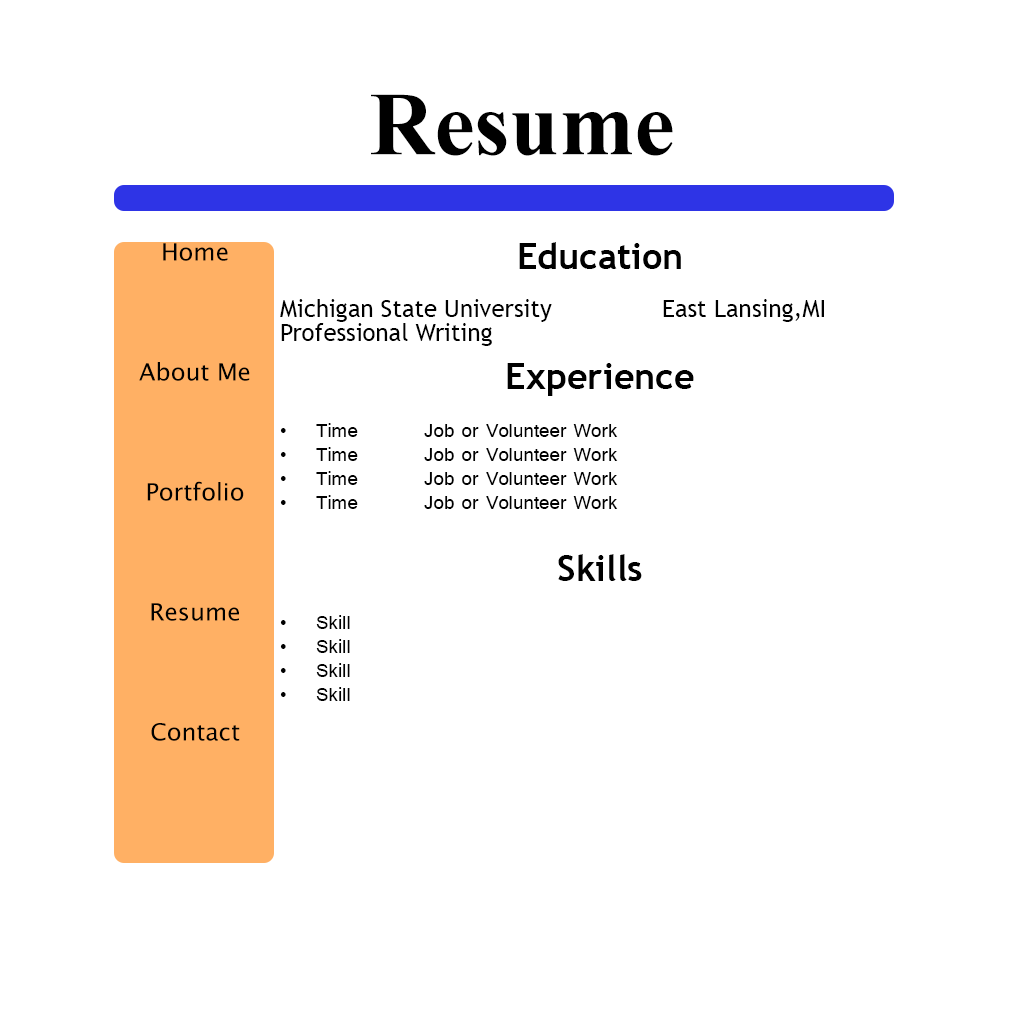
<style>
.page{position:relative;width:1020px;height:1020px;background:#ffffff}
.page>*{position:absolute;margin:0}
.t1{font:90px "TimesNewRomanPS-BoldMT";color:#000000}
.t2{font:24px/24px "LucidaSansUnicode";color:#000000}
.t3{font:24px/24px "Tunga";color:#000000}
.t4{font:36px/24px "TrebuchetMS-Bold";color:#000000}
.t5{font:24px/24px "TrebuchetMS";color:#000000}
</style>
<div class="page">
<p class="t1" style="left:371px;top:94px;width:302px;height:62px">Resume</p>
<p class="t2" style="left:139px;top:243px;width:111px;height:498px;text-align:center">Home<br><br><br><br><br>About Me<br><br><br><br><br>Portfolio<br><br><br><br><br>Resume<br><br><br><br><br>Contact</p>
<p class="t3" style="left:280px;top:242px;width:544px;height:459px;text-align:center"><span class="t4">Education<br><br></span><span class="t5">Michigan State University East Lansing,MI<br>Professional Writing<br></span><span class="t4"><br>Experience<br><br></span>• Time  Job or Volunteer Work<br>• Time  Job or Volunteer Work<br>• Time  Job or Volunteer Work<br>• Time  Job or Volunteer Work<br><br><span class="t4"><br>Skills<br><br></span>• Skill<br>• Skill<br>• Skill<br>• Skill</p>
</div>
